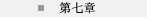
<style>
.page{position:relative;width:147px;height:17px;background:#f1f1f1}
.page>*{position:absolute;margin:0}
.t1{font:12px "SimSun";color:#000000;font-weight:bold}
</style>
<div class="page">
<p class="t1" style="left:39px;top:0px;width:77px;height:17px">第七章</p>
</div>
